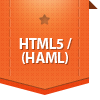
<style>
.page{position:relative;width:100px;height:100px;background:#ffffff}
.page>*{position:absolute;margin:0}
.t1{font:15px/14px "MyriadPro-Bold";letter-spacing:-0.025em;color:#ffffff;text-transform:uppercase}
</style>
<div class="page">
<p class="t1" style="left:19px;top:38px;width:53px;height:26px;text-align:center">HTML5 / (HAML)</p>
</div>
